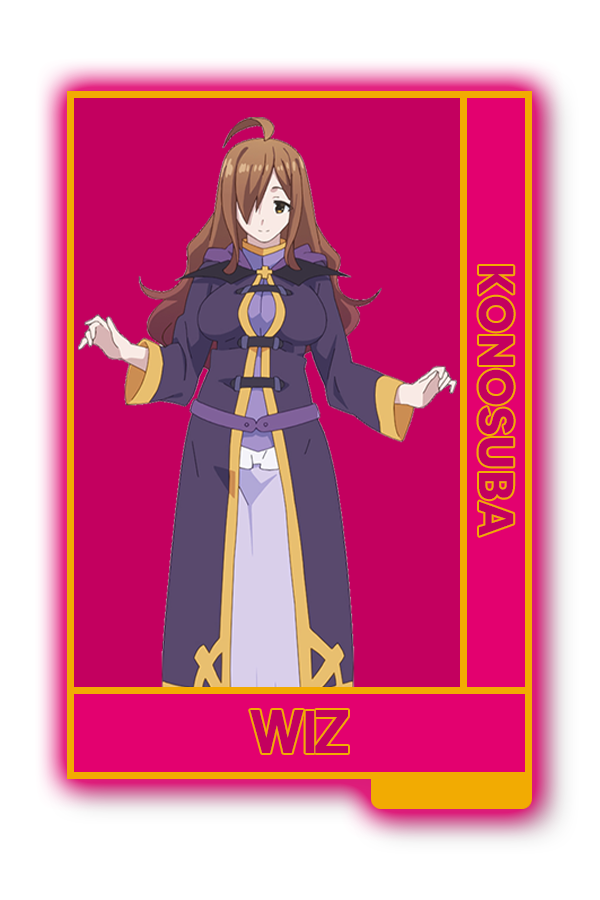
<style>
.page{position:relative;width:600px;height:900px;background:#c3005f}
.page>*{position:absolute;margin:0}
.t1{font:48.8px "MADETOMMY-Bold";color:#c3005f}
.t2{font:62.7px "CoolveticaRg-Regular";color:#c3005f}
</style>
<div class="page">
<p class="t1" style="left:478px;top:266px;width:36px;height:270px;rotate:90deg">KONOSUBA</p>
<p class="t2" style="left:250px;top:710px;width:98px;height:43px">WIZ</p>
</div>
